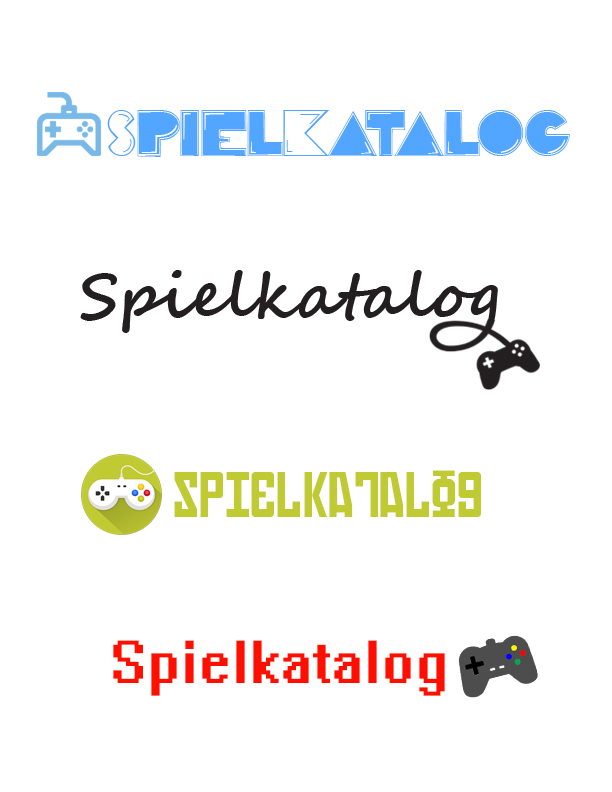
<style>
.page{position:relative;width:612px;height:792px;background:#ffffff}
.page>*{position:absolute;margin:0}
.t1{font:46.1px "PacFont";color:#53a6ff}
.t2{font:54.5px "Russian";color:#c0ca33}
.t3{font:54.5px "System";color:#ff0f00}
</style>
<div class="page">
<p class="t1" style="left:107px;top:110px;width:463px;height:47px">SpielKatalog</p>
<p class="t2" style="left:174px;top:470px;width:307px;height:47px">SpielKatalog</p>
<p class="t3" style="left:113px;top:640px;width:332px;height:56px">Spielkatalog</p>
</div>
